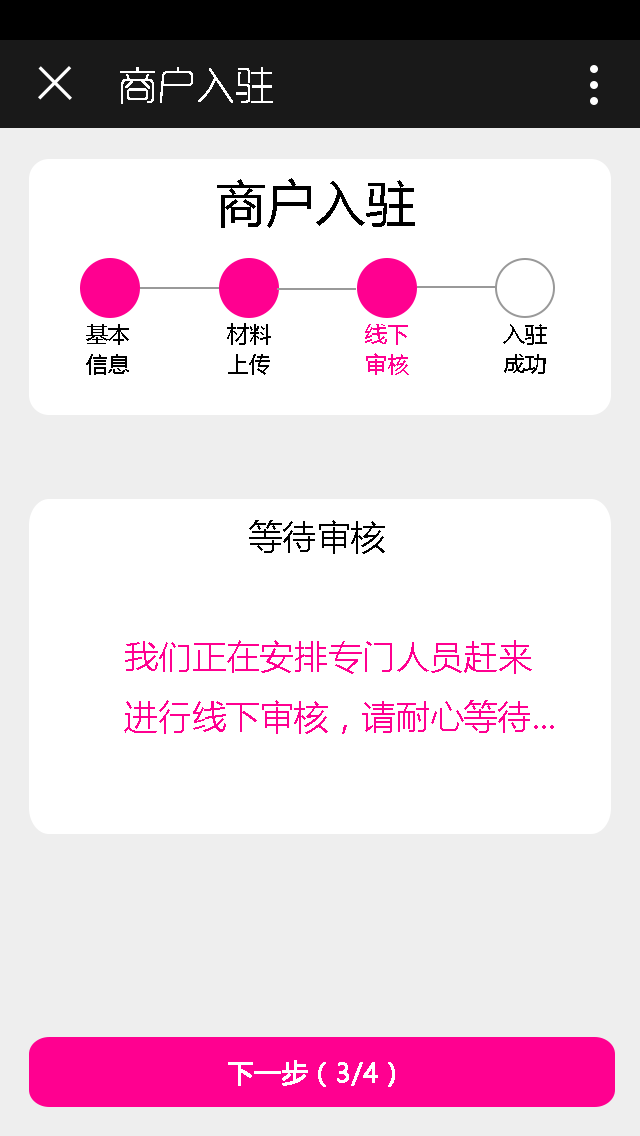
<style>
.page{position:relative;width:640px;height:1136px;background:#ffffff}
.page>*{position:absolute;margin:0}
.t1{font:38px "RTWSYueGoG0v1-ExLight";color:#ffffff;font-weight:bold}
.t2{font:50px "MicrosoftYaHei";color:#000000}
.t3{font:22px/30px "MicrosoftYaHei";color:#000000}
.t4{font:22px/30px "MicrosoftYaHei";color:#ff0090}
.t5{font:34px "MicrosoftYaHei";color:#000000}
.t6{font:34px/30px "MicrosoftYaHei";color:#ff0090}
.t7{font:26px "MicrosoftYaHei";color:#ffffff;font-weight:bold}
</style>
<div class="page">
<p class="t1" style="left:120px;top:67px;width:153px;height:37px">商户入驻</p>
<p class="t2" style="left:217px;top:178px;width:198px;height:50px">商户入驻</p>
<p class="t3" style="left:86px;top:324px;width:43px;height:51px">基本<br>信息</p>
<p class="t3" style="left:227px;top:323px;width:44px;height:52px">材料<br>上传</p>
<p class="t4" style="left:365px;top:324px;width:44px;height:51px">线下<br>审核</p>
<p class="t3" style="left:503px;top:324px;width:44px;height:50px">入驻<br>成功</p>
<p class="t5" style="left:249px;top:520px;width:136px;height:34px">等待审核</p>
<p class="t6" style="left:124px;top:640px;width:430px;height:94px">我们正在安排专门人员赶来<br><br>进行线下审核，请耐心等待...</p>
<p class="t7" style="left:228px;top:1060px;width:167px;height:27px">下一步（3/4）</p>
</div>
